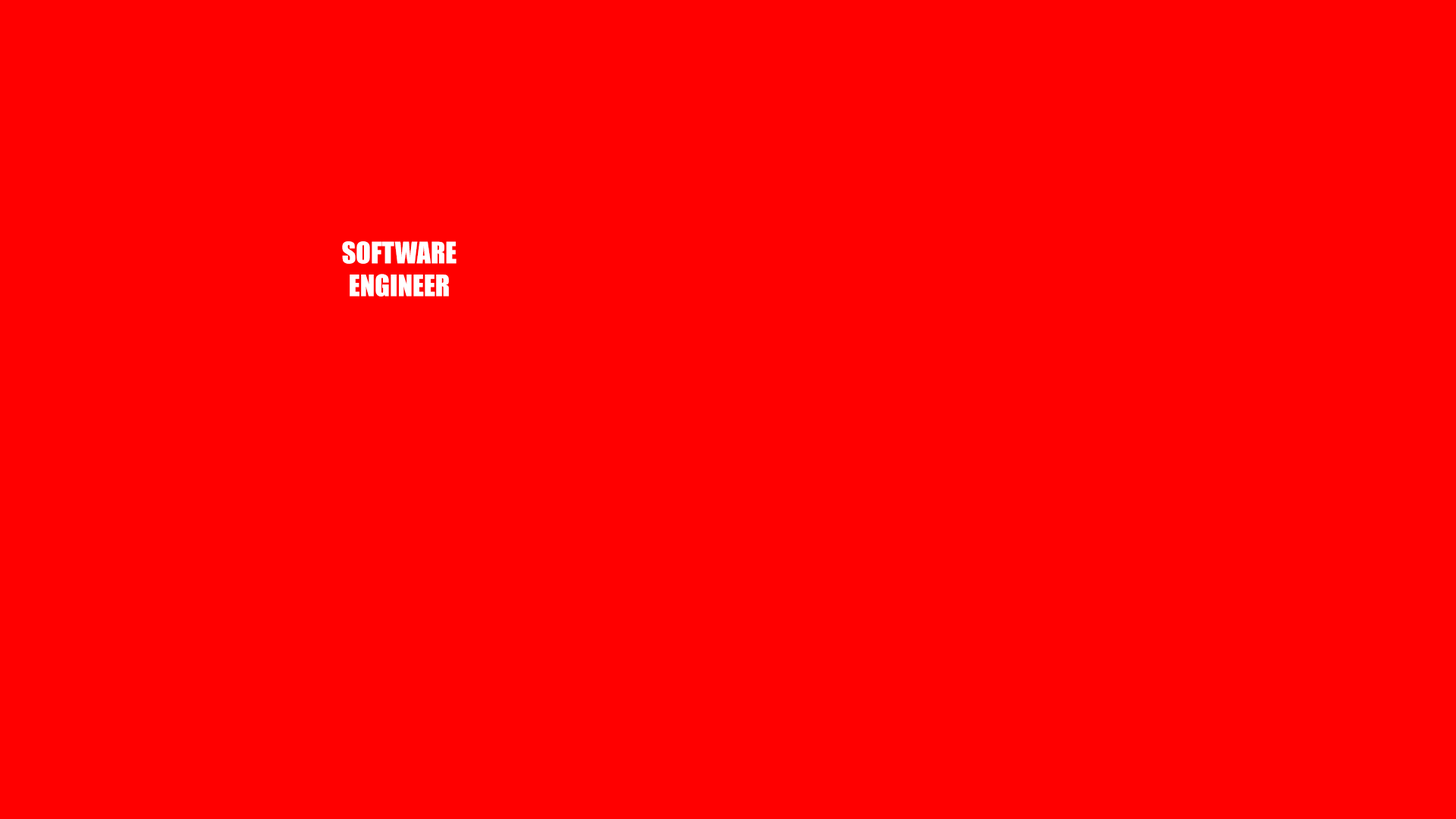
<style>
.page{position:relative;width:1456px;height:819px;background:#ff0000}
.page>*{position:absolute;margin:0}
.t1{font:27.3px "Impact";color:#ffffff;text-transform:uppercase}
</style>
<div class="page">
<p class="t1" style="left:342px;top:241px;width:115px;height:56px;text-align:center">Software<br>Engineer</p>
</div>
